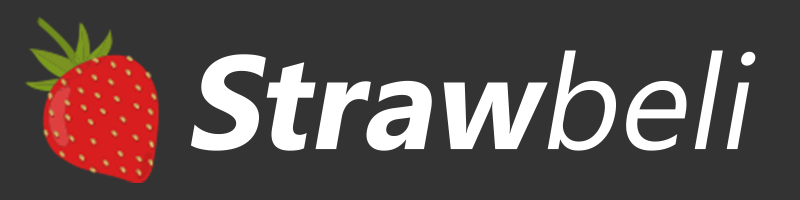
<style>
.page{position:relative;width:800px;height:200px;background:#333333}
.page>*{position:absolute;margin:0}
.t1{font:132.7px "SegoeUI-Bold";color:#ffffff;font-style:italic}
.t2{font:132.7px "SegoeUI";color:#ffffff;font-style:italic}
</style>
<div class="page">
<p class="t1" style="left:190px;top:50px;width:566px;height:101px">Straw<span class="t2">beli</span></p>
</div>
